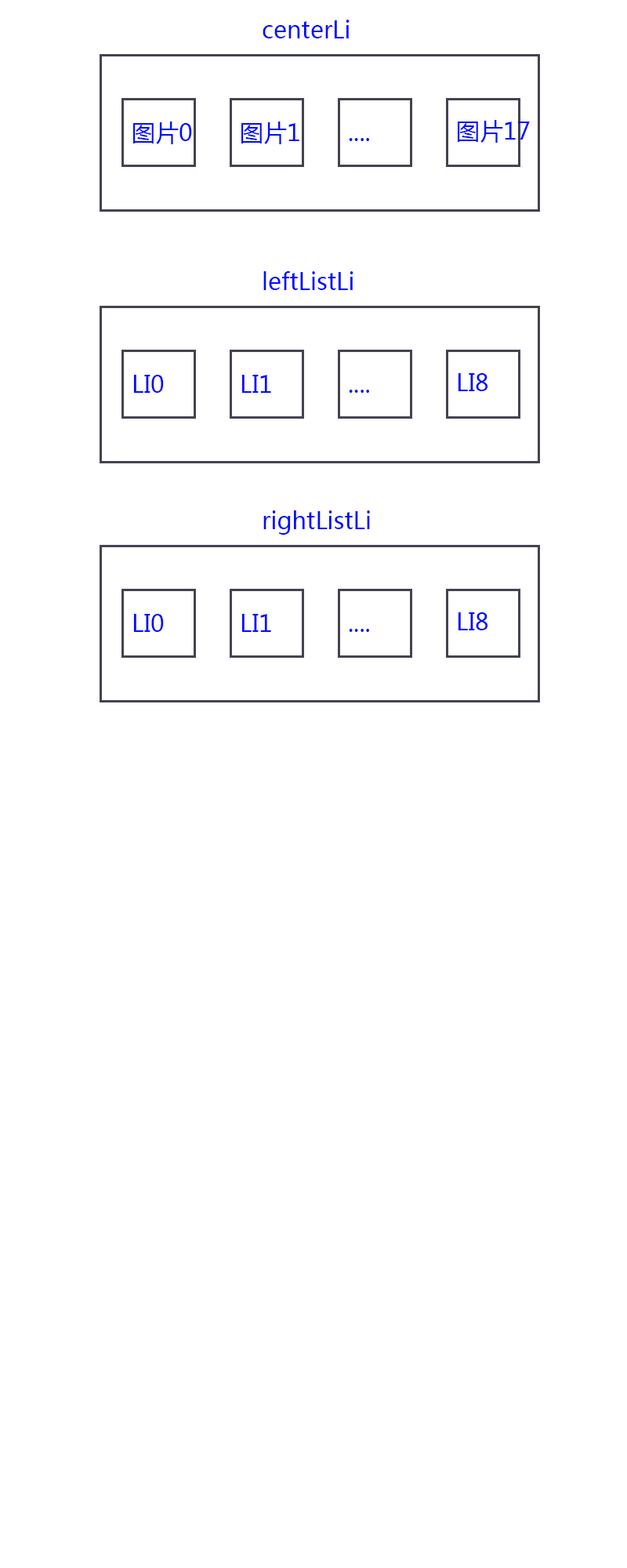
<style>
.page{position:relative;width:627px;height:1568px;background:#ffffff}
.page>*{position:absolute;margin:0}
.t1{font:23.5px "MicrosoftYaHei";color:#000cff}
</style>
<div class="page">
<p class="t1" style="left:263px;top:20px;width:87px;height:18px">centerLi</p>
<p class="t1" style="left:133px;top:122px;width:59px;height:22px">图片0</p>
<p class="t1" style="left:241px;top:122px;width:58px;height:22px">图片1</p>
<p class="t1" style="left:458px;top:120px;width:72px;height:23px">图片17</p>
<p class="t1" style="left:349px;top:138px;width:20px;height:3px">....</p>
<p class="t1" style="left:263px;top:271px;width:91px;height:19px">leftListLi</p>
<p class="t1" style="left:133px;top:375px;width:31px;height:18px">LI0</p>
<p class="t1" style="left:241px;top:375px;width:30px;height:18px">LI1</p>
<p class="t1" style="left:458px;top:373px;width:30px;height:18px">LI8</p>
<p class="t1" style="left:349px;top:390px;width:20px;height:3px">....</p>
<p class="t1" style="left:263px;top:510px;width:107px;height:25px">rightListLi</p>
<p class="t1" style="left:133px;top:614px;width:31px;height:18px">LI0</p>
<p class="t1" style="left:241px;top:614px;width:30px;height:18px">LI1</p>
<p class="t1" style="left:458px;top:612px;width:30px;height:18px">LI8</p>
<p class="t1" style="left:349px;top:629px;width:20px;height:3px">....</p>
</div>
